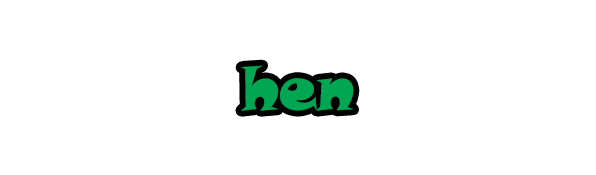
<style>
.page{position:relative;width:596px;height:175px;background:#ffffff}
.page>*{position:absolute;margin:0}
.t1{font:60px "SnapITC-Regular";color:#00a651}
</style>
<div class="page">
<p class="t1" style="left:241px;top:65px;width:113px;height:46px">hen</p>
</div>
